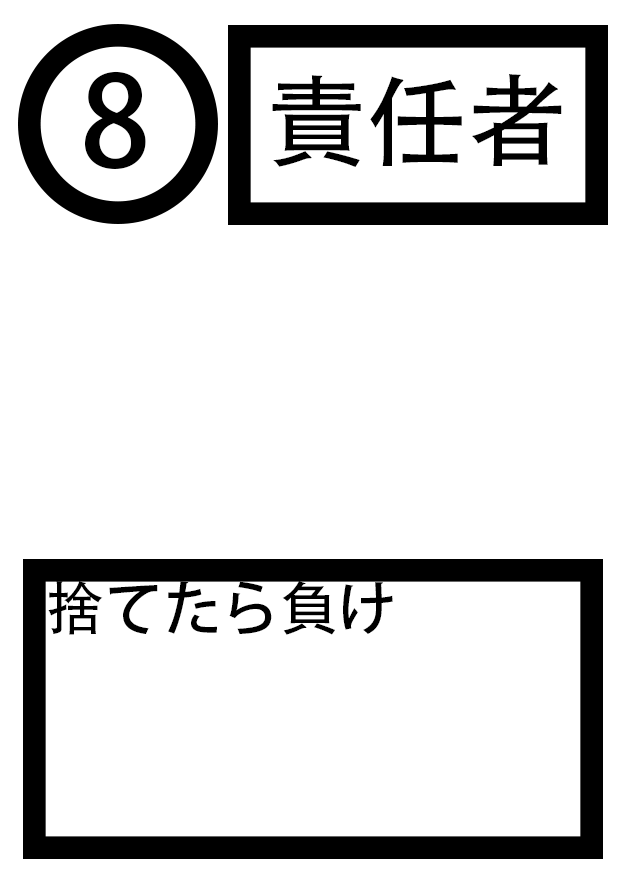
<style>
.page{position:relative;width:625px;height:875px;background:#ffffff}
.page>*{position:absolute;margin:0}
.t1{font:125px "AdobeHeitiStd-Regular";color:#000000}
.t2{font:100px "AdobeHeitiStd-Regular";color:#000000}
.t3{font:58.3px "AdobeHeitiStd-Regular";color:#000000}
</style>
<div class="page">
<p class="t1" style="left:85px;top:71px;width:61px;height:98px">8</p>
<p class="t2" style="left:272px;top:74px;width:290px;height:93px">責任者</p>
<p class="t3" style="left:48px;top:581px;width:345px;height:54px">捨てたら負け</p>
</div>
